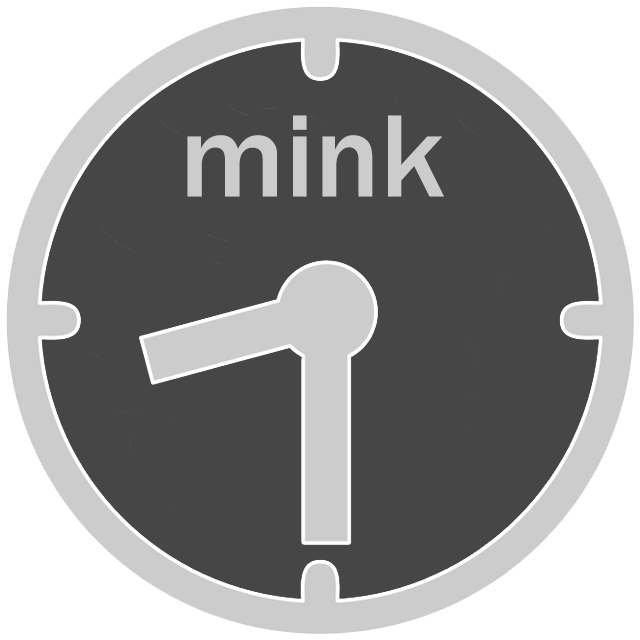
<style>
.page{position:relative;width:640px;height:640px;background:#464646}
.page>*{position:absolute;margin:0}
.t1{font:121px "FranklinGothic-Medium";color:#cccccc}
</style>
<div class="page">
<p class="t1" style="left:187px;top:115px;width:257px;height:82px">mink</p>
</div>
